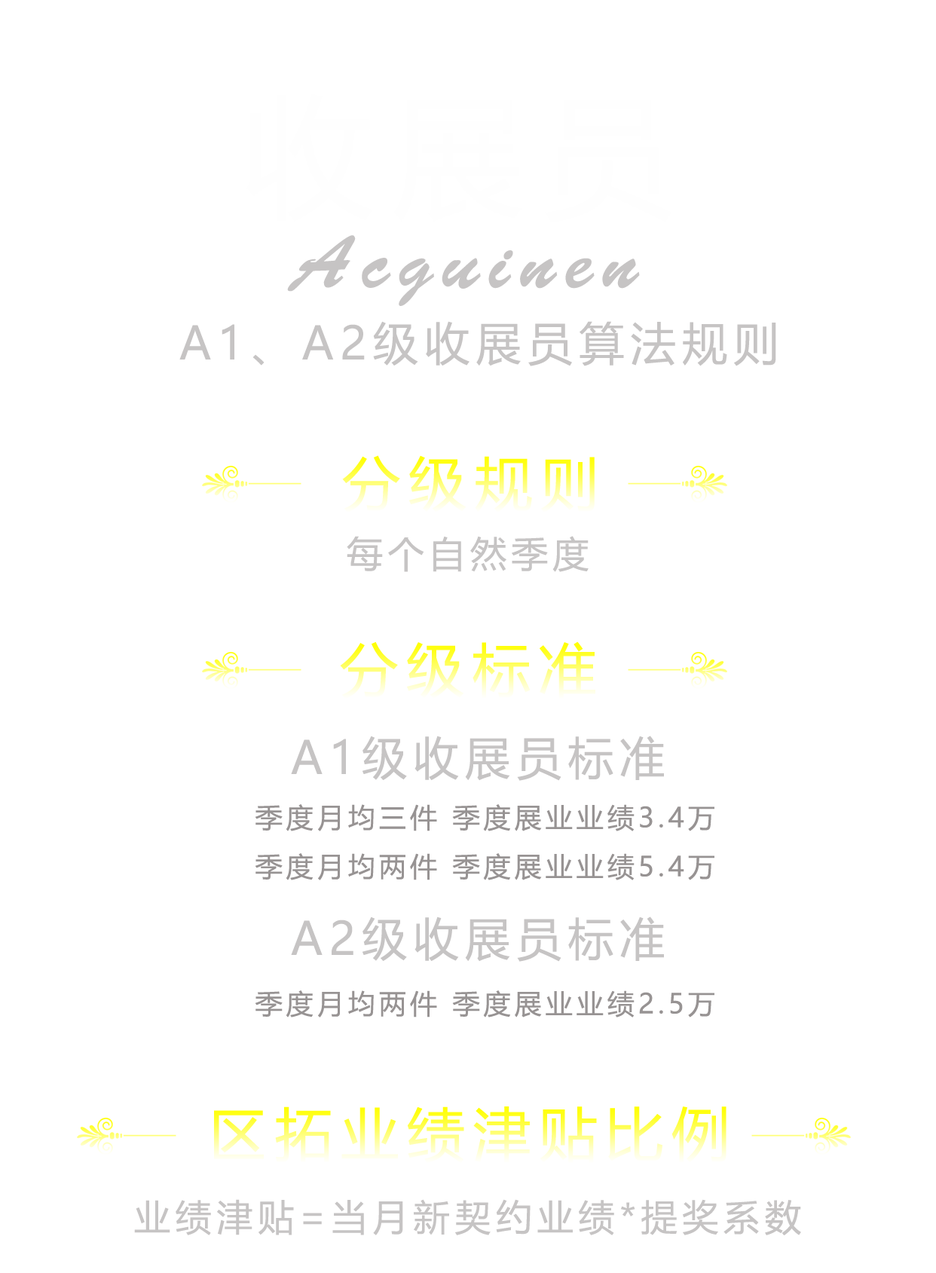
<style>
.page{position:relative;width:936px;height:1273px;background:#ffffff}
.page>*{position:absolute;margin:0}
.t1{font:75.1px "BrushScriptStd";letter-spacing:0.14em;color:#c6c4c4}
.t2{font:45.2px "MicrosoftYaHei";letter-spacing:0.14em;color:#c6c4c4}
.t3{font:58px "MicrosoftYaHei";letter-spacing:0.14em}
.t4{font:36.2px "MicrosoftYaHei";letter-spacing:0.14em;color:#c6c4c4}
.t5{font:27.1px "MicrosoftYaHei";letter-spacing:0.14em;color:#979393}
</style>
<div class="page">
<p class="t1" style="left:287px;top:235px;width:353px;height:71px">Acguinen</p>
<p class="t2" style="left:179px;top:321px;width:598px;height:45px">A1、A2级收展员算法规则</p>
<p class="t3" style="left:342px;top:455px;width:253px;height:58px">分级规则</p>
<p class="t4" style="left:347px;top:536px;width:242px;height:36px">每个自然季度</p>
<p class="t3" style="left:340px;top:642px;width:256px;height:57px">分级标准</p>
<p class="t2" style="left:291px;top:736px;width:373px;height:45px">A1级收展员标准</p>
<p class="t5" style="left:255px;top:804px;width:460px;height:28px">季度月均三件 季度展业业绩3.4万</p>
<p class="t5" style="left:255px;top:853px;width:460px;height:28px">季度月均两件 季度展业业绩5.4万</p>
<p class="t2" style="left:291px;top:917px;width:373px;height:45px">A2级收展员标准</p>
<p class="t5" style="left:255px;top:991px;width:460px;height:27px">季度月均两件 季度展业业绩2.5万</p>
<p class="t3" style="left:214px;top:1107px;width:513px;height:57px">区拓业绩津贴比例</p>
<p class="t4" style="left:134px;top:1200px;width:667px;height:36px">业绩津贴=当月新契约业绩*提奖系数</p>
</div>
